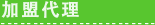
<style>
.page{position:relative;width:155px;height:25px;background:#58c62f}
.page>*{position:absolute;margin:0}
.t1{font:18px "AdobeHeitiStd-Regular";letter-spacing:0.1em;color:#fdfdff;font-weight:bold}
</style>
<div class="page">
<p class="t1" style="left:1px;top:0px;width:78px;height:18px;opacity:0.9">加盟代理</p>
</div>
